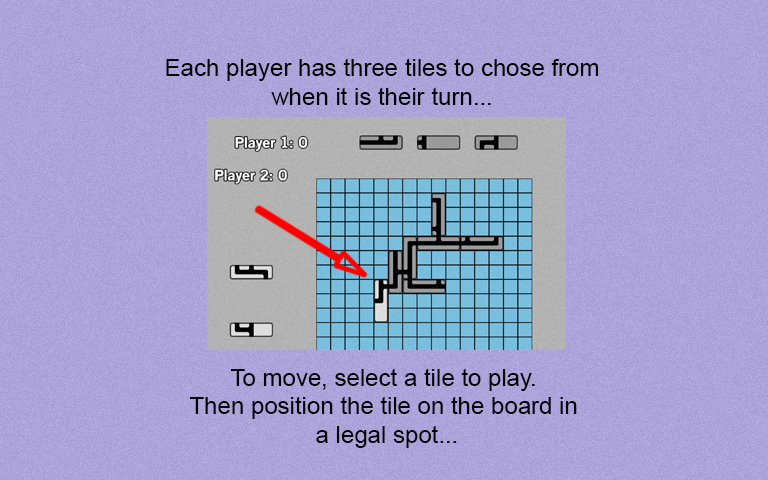
<style>
.page{position:relative;width:768px;height:480px}
.page>*{position:absolute;margin:0}
.t1{font:24px "ArialMT";color:#000000}
</style>
<div class="page">
<p class="t1" style="left:166px;top:58px;width:433px;height:47px;text-align:center">Each player has three tiles to chose from<br>when it is their turn...</p>
<p class="t1" style="left:189px;top:368px;width:388px;height:80px;text-align:center">To move, select a tile to play.<br>Then position the tile on the board in<br> a legal spot...</p>
</div>
